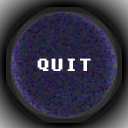
<style>
.page{position:relative;width:128px;height:128px}
.page>*{position:absolute;margin:0}
.t1{font:18px "Commodore-64-Pixelized";color:#ffffff}
</style>
<div class="page">
<p class="t1" style="left:37px;top:58px;width:54px;height:13px">QUIT</p>
</div>
